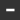
<style>
.page{position:relative;width:20px;height:20px;background:#333333}
.page>*{position:absolute;margin:0}
.t1{font:33.3px "MyriadPro-Regular";color:#ffffff}
</style>
<div class="page">
<p class="t1" style="left:6px;top:8px;width:9px;height:4px">-</p>
</div>
